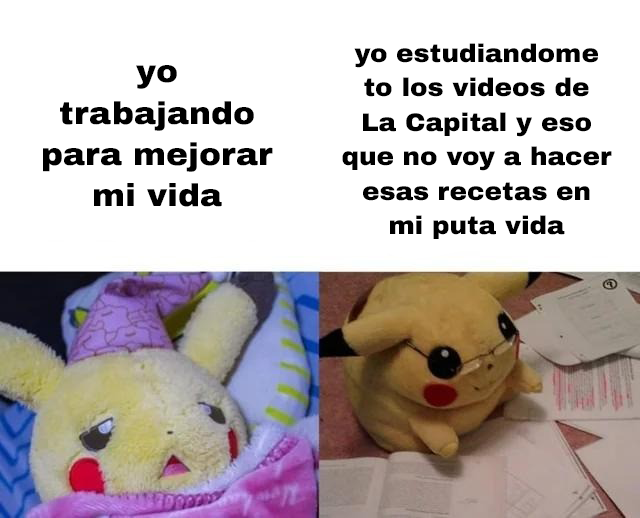
<style>
.page{position:relative;width:640px;height:518px;background:#ffffff}
.page>*{position:absolute;margin:0}
.t1{font:25.2px "ArchivoBlack-Regular";color:#000000;scale:1.04 1}
.t2{font:31.7px "ArchivoBlack-Regular";color:#000000;scale:1.04 1}
</style>
<div class="page">
<p class="t1" style="left:342px;top:43px;width:270px;height:196px;text-align:center">yo estudiandome<br>to los videos de<br>La Capital y eso<br>que no voy a hacer<br>esas recetas en<br>mi puta vida</p>
<p class="t2" style="left:43px;top:65px;width:230px;height:142px;text-align:center">yo<br>trabajando<br>para mejorar<br>mi vida</p>
</div>
